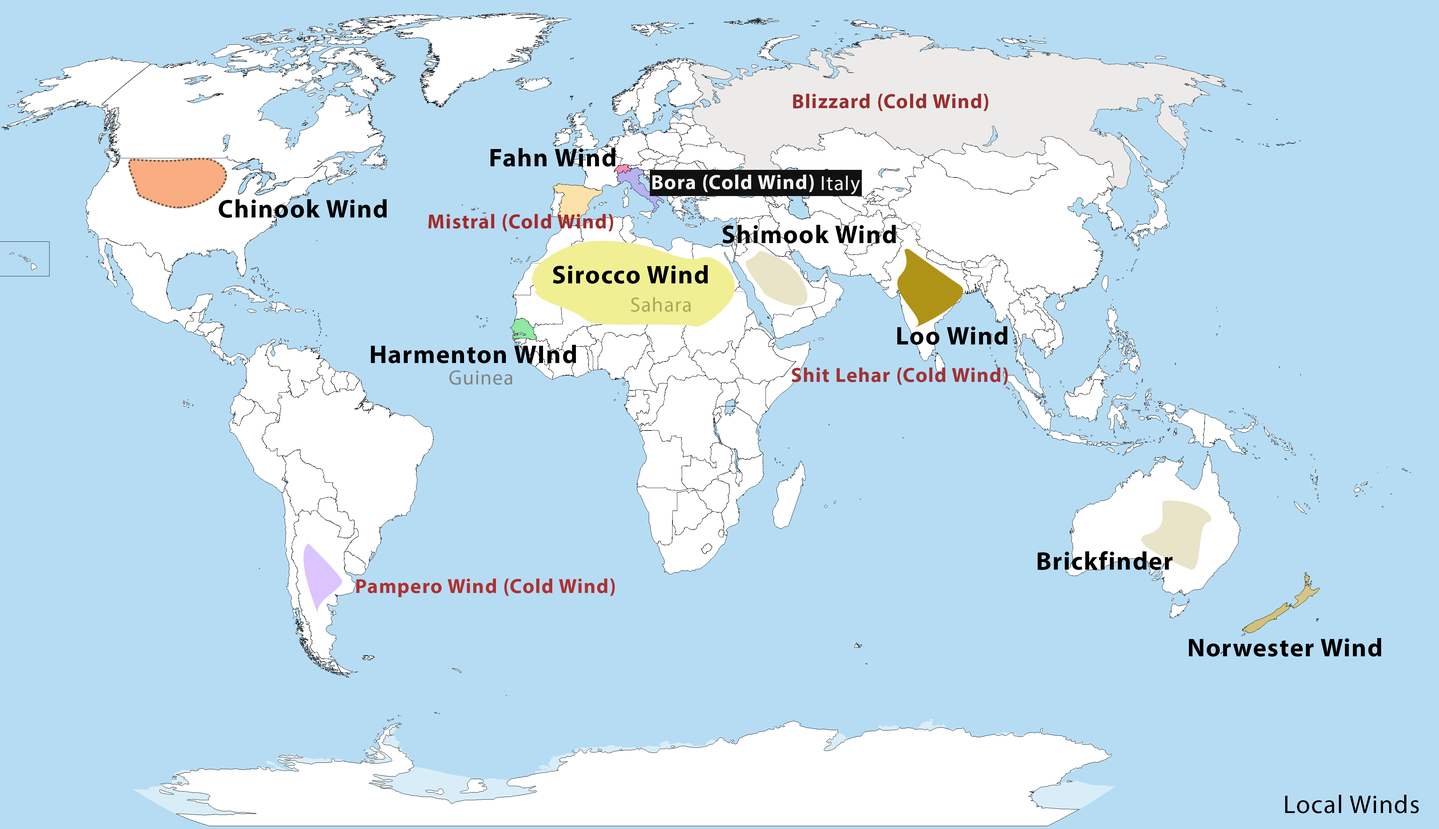
<style>
.page{position:relative;width:1439px;height:829px;background:#b6dcf4}
.page>*{position:absolute;margin:0}
.t1{font:20.5px "MyriadHebrew-Bold";letter-spacing:0.04em;color:#992f2f}
.t2{font:25.6px "MyriadHebrew-Bold";letter-spacing:0.04em;color:#000000}
.t3{font:20.5px "MyriadHebrew-Bold";letter-spacing:0.04em;color:#f3f3f3}
.t4{font:20.5px "MyriadHebrew-Regular";letter-spacing:0.04em;color:#f3f3f3}
.t5{font:20.5px "MyriadHebrew-Bold";letter-spacing:0.04em;color:#a12d2d}
.t6{font:20.5px "MyriadHebrew-Regular";letter-spacing:0.04em;color:#a8a75a}
.t7{font:20.5px "MyriadHebrew-Regular";letter-spacing:0.04em;color:#828282}
.t8{font:20.5px "MyriadHebrew-Bold";letter-spacing:0.04em;color:#a13333}
.t9{font:20.5px "MyriadHebrew-Bold";letter-spacing:0.04em;color:#b03030}
.t10{font:25.6px "MyriadHebrew-Regular";letter-spacing:0.04em;color:#000000}
</style>
<div class="page">
<p class="t1" style="left:793px;top:94px;width:195px;height:17px">Blizzard (Cold Wind)</p>
<p class="t2" style="left:490px;top:148px;width:125px;height:19px">Fahn Wind</p>
<p class="t3" style="left:652px;top:175px;width:162px;height:17px">Bora (Cold Wind)</p>
<p class="t4" style="left:822px;top:176px;width:38px;height:18px">Italy</p>
<p class="t2" style="left:219px;top:199px;width:168px;height:19px">Chinook Wind</p>
<p class="t5" style="left:428px;top:214px;width:185px;height:17px">Mistral (Cold Wind)</p>
<p class="t2" style="left:722px;top:225px;width:174px;height:18px">Shimook Wind</p>
<p class="t2" style="left:553px;top:265px;width:155px;height:19px">Sirocco Wind</p>
<p class="t6" style="left:631px;top:297px;width:60px;height:15px">Sahara</p>
<p class="t2" style="left:897px;top:326px;width:110px;height:19px">Loo Wind</p>
<p class="t2" style="left:371px;top:345px;width:205px;height:18px">Harmenton WInd</p>
<p class="t7" style="left:449px;top:370px;width:63px;height:15px">Guinea</p>
<p class="t8" style="left:791px;top:367px;width:217px;height:18px">Shit Lehar (Cold Wind)</p>
<p class="t2" style="left:1038px;top:551px;width:134px;height:19px">Brickfinder</p>
<p class="t9" style="left:356px;top:578px;width:259px;height:19px">Pampero Wind (Cold Wind)</p>
<p class="t2" style="left:1189px;top:638px;width:192px;height:18px">Norwester Wind</p>
<p class="t10" style="left:1285px;top:795px;width:134px;height:18px">Local Winds</p>
</div>
